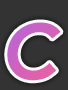
<style>
.page{position:relative;width:68px;height:90px;background:#333333}
.page>*{position:absolute;margin:0}
.t1{font:77px "ProductSans-BoldItalic";letter-spacing:-0.22em;color:#cc63c0}
</style>
<div class="page">
<p class="t1" style="left:7px;top:22px;width:54px;height:59px">C</p>
</div>
